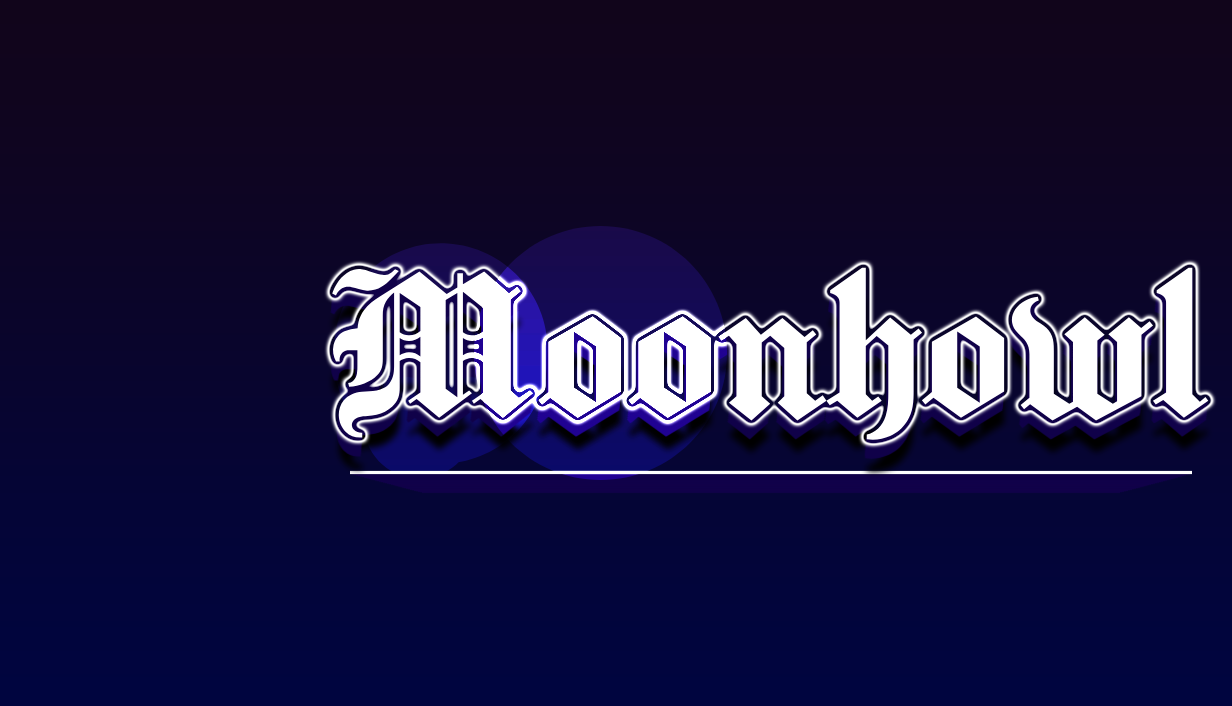
<style>
.page{position:relative;width:1232px;height:706px}
.page>*{position:absolute;margin:0}
.t1{font:195.6px "Chomsky";color:#ffffff}
</style>
<div class="page">
<p class="t1" style="left:332px;top:267px;width:877px;height:173px">Moonhowl</p>
</div>
